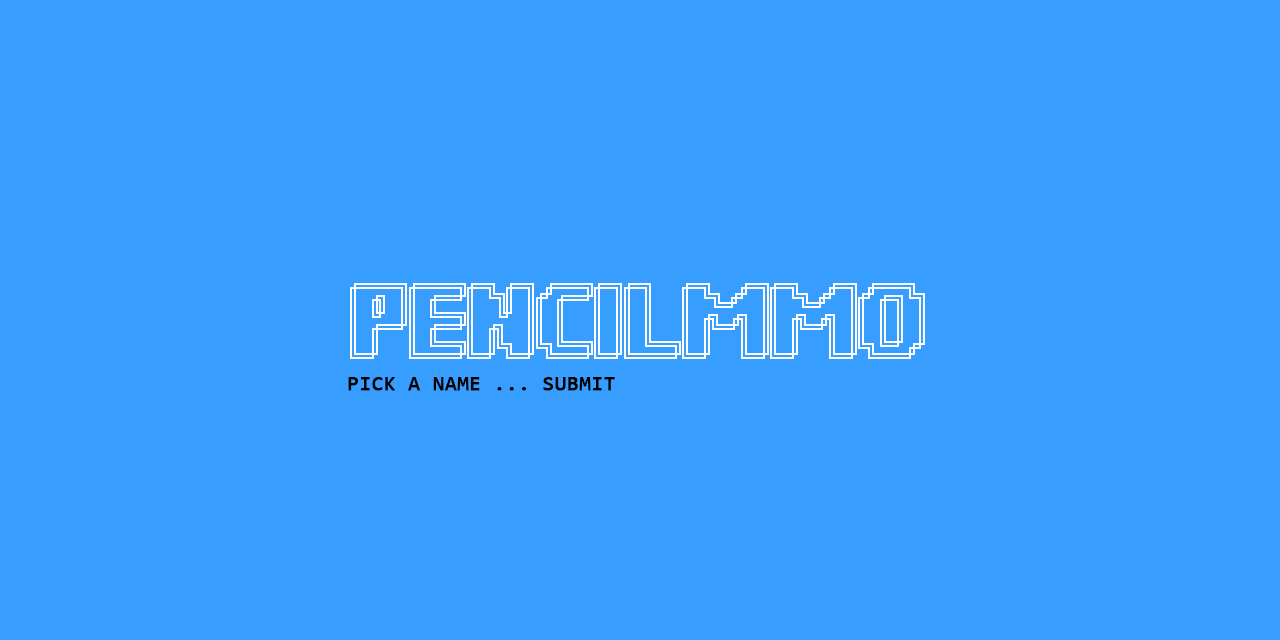
<style>
.page{position:relative;width:1280px;height:640px;background:#379dff}
.page>*{position:absolute;margin:0}
.t1{font:21.2px "Consolas";color:#000000;font-weight:bold}
</style>
<div class="page">
<p class="t1" style="left:348px;top:377px;width:267px;height:14px">PICK A NAME ... SUBMIT</p>
</div>
